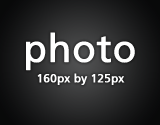
<style>
.page{position:relative;width:160px;height:125px}
.page>*{position:absolute;margin:0}
.t1{font:38.4px "FrutigerLT-Roman";color:#ffffff;font-weight:bold}
.t2{font:11.5px "FrutigerLT-Roman";color:#ffffff;font-weight:bold}
</style>
<div class="page">
<p class="t1" style="left:26px;top:32px;width:109px;height:39px">photo</p>
<p class="t2" style="left:37px;top:73px;width:88px;height:12px">160px by 125px</p>
</div>
